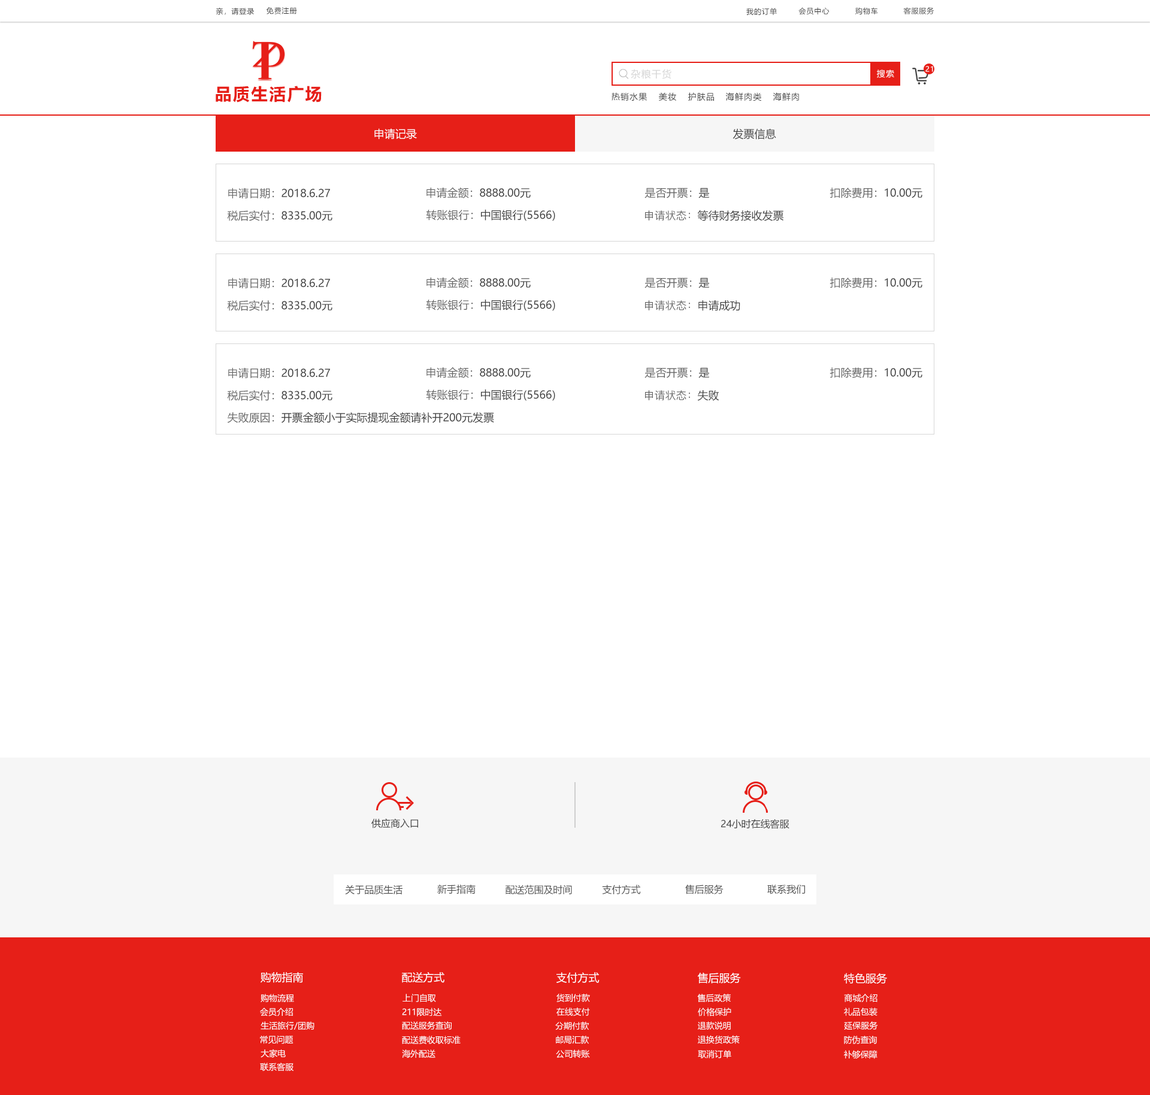
<style>
.page{position:relative;width:1150px;height:1095px;background:#ffffff}
.page>*{position:absolute;margin:0}
.t1{font:7.2px "MicrosoftYaHei";letter-spacing:0.08em;color:#404040}
.t2{font:7.2px "MicrosoftYaHei";letter-spacing:0.08em;color:#ffffff}
.t3{font:9.6px "MicrosoftYaHei";letter-spacing:0.08em;color:#d6d6d6}
.t4{font:8.4px "MicrosoftYaHei";letter-spacing:0.08em;color:#ffffff}
.t5{font:16.8px "MicrosoftYaHei-Bold";letter-spacing:0.08em;color:#e61f18}
.t6{font:8.4px "MicrosoftYaHei";letter-spacing:0.08em;color:#404040}
.t7{font:10.8px "MicrosoftYaHei";color:#ffffff}
.t8{font:10.8px "MicrosoftYaHei";color:#404040}
.t9{font:10.8px "MicrosoftYaHei";color:#404040;text-transform:uppercase}
.t10{font:10.8px "MicrosoftYaHei";color:#666666;text-transform:uppercase}
.t11{font:10.8px "PingFang-SC-Medium";color:#666666;text-transform:uppercase}
.t12{font:9.6px "MicrosoftYaHei";color:#404040}
.t13{font:9.6px "MicrosoftYaHei";color:#505050}
.t14{font:8.4px "MicrosoftYaHei";color:#ffffff}
</style>
<div class="page">
<p class="t1" style="left:216px;top:7px;width:38px;height:8px">亲，请登录</p>
<p class="t1" style="left:266px;top:7px;width:31px;height:7px">免费注册</p>
<p class="t1" style="left:747px;top:8px;width:30px;height:7px">我的订单</p>
<p class="t1" style="left:799px;top:7px;width:31px;height:8px">会员中心</p>
<p class="t1" style="left:856px;top:7px;width:22px;height:8px">购物车</p>
<p class="t1" style="left:904px;top:7px;width:31px;height:7px">客服服务</p>
<p class="t2" style="left:926px;top:66px;width:8px;height:6px">21</p>
<p class="t3" style="left:631px;top:69px;width:41px;height:10px">杂粮干货</p>
<p class="t4" style="left:877px;top:70px;width:18px;height:8px">搜索</p>
<p class="t5" style="left:216px;top:86px;width:106px;height:16px">品质生活广场</p>
<p class="t6" style="left:612px;top:92px;width:36px;height:9px">热销水果</p>
<p class="t6" style="left:659px;top:92px;width:17px;height:9px">美妆</p>
<p class="t6" style="left:688px;top:92px;width:26px;height:9px">护肤品</p>
<p class="t6" style="left:726px;top:92px;width:36px;height:9px">海鲜肉类</p>
<p class="t6" style="left:773px;top:92px;width:26px;height:9px">海鲜肉</p>
<p class="t7" style="left:374px;top:128px;width:43px;height:11px">申请记录</p>
<p class="t8" style="left:733px;top:128px;width:44px;height:12px">发票信息</p>
<p class="t9" style="left:228px;top:188px;width:102px;height:11px"><span class="t10">申请日期：</span>2018.6.27</p>
<p class="t9" style="left:427px;top:187px;width:104px;height:11px"><span class="t10">申请金额：</span>8888.00元</p>
<p class="t10" style="left:645px;top:188px;width:65px;height:10px">是否开票：<span class="t9">是</span></p>
<p class="t9" style="left:830px;top:188px;width:93px;height:10px"><span class="t10">扣除费用：</span>10.00元</p>
<p class="t9" style="left:426px;top:209px;width:129px;height:12px"><span class="t10">转账银行：</span>中国银行(5566)</p>
<p class="t9" style="left:645px;top:210px;width:139px;height:11px"><span class="t11">申请状态：</span>等待财务接收发票</p>
<p class="t9" style="left:227px;top:210px;width:106px;height:11px"><span class="t10">税后实付：</span>8335.00元</p>
<p class="t9" style="left:228px;top:277px;width:102px;height:12px"><span class="t10">申请日期：</span>2018.6.27</p>
<p class="t9" style="left:427px;top:277px;width:104px;height:11px"><span class="t10">申请金额：</span>8888.00元</p>
<p class="t10" style="left:645px;top:277px;width:65px;height:11px">是否开票：<span class="t9">是</span></p>
<p class="t9" style="left:830px;top:277px;width:93px;height:11px"><span class="t10">扣除费用：</span>10.00元</p>
<p class="t9" style="left:227px;top:300px;width:106px;height:11px"><span class="t10">税后实付：</span>8335.00元</p>
<p class="t9" style="left:426px;top:299px;width:129px;height:12px"><span class="t10">转账银行：</span>中国银行(5566)</p>
<p class="t11" style="left:645px;top:300px;width:96px;height:11px">申请状态：<span class="t9">申请成功</span></p>
<p class="t9" style="left:228px;top:367px;width:102px;height:12px"><span class="t10">申请日期：</span>2018.6.27</p>
<p class="t9" style="left:427px;top:367px;width:104px;height:11px"><span class="t10">申请金额：</span>8888.00元</p>
<p class="t10" style="left:645px;top:367px;width:65px;height:11px">是否开票：<span class="t9">是</span></p>
<p class="t9" style="left:830px;top:367px;width:93px;height:11px"><span class="t10">扣除费用：</span>10.00元</p>
<p class="t9" style="left:426px;top:389px;width:129px;height:12px"><span class="t10">转账银行：</span>中国银行(5566)</p>
<p class="t9" style="left:227px;top:390px;width:106px;height:11px"><span class="t10">税后实付：</span>8335.00元</p>
<p class="t11" style="left:645px;top:390px;width:75px;height:11px">申请状态：<span class="t9">失败</span></p>
<p class="t9" style="left:227px;top:412px;width:267px;height:11px"><span class="t10">失败原因：</span>开票金额小于实际提现金额请补开200元发票</p>
<p class="t12" style="left:372px;top:818px;width:46px;height:10px">供应商入口</p>
<p class="t12" style="left:721px;top:819px;width:69px;height:10px">24小时在线客服</p>
<p class="t13" style="left:345px;top:884px;width:58px;height:11px">关于品质生活</p>
<p class="t13" style="left:437px;top:884px;width:39px;height:10px">新手指南</p>
<p class="t13" style="left:506px;top:884px;width:66px;height:11px">配送范围及时间</p>
<p class="t13" style="left:602px;top:884px;width:39px;height:10px">支付方式</p>
<p class="t13" style="left:685px;top:884px;width:39px;height:10px">售后服务</p>
<p class="t13" style="left:768px;top:884px;width:37px;height:10px">联系我们</p>
<p class="t7" style="left:261px;top:972px;width:42px;height:11px">购物指南</p>
<p class="t7" style="left:402px;top:972px;width:43px;height:11px">配送方式</p>
<p class="t7" style="left:557px;top:972px;width:43px;height:11px">支付方式</p>
<p class="t7" style="left:697px;top:972px;width:44px;height:11px">售后服务</p>
<p class="t7" style="left:844px;top:972px;width:43px;height:12px">特色服务</p>
<p class="t14" style="left:261px;top:993px;width:33px;height:9px">购物流程</p>
<p class="t14" style="left:403px;top:993px;width:33px;height:9px">上门自取</p>
<p class="t14" style="left:557px;top:993px;width:33px;height:9px">货到付款</p>
<p class="t14" style="left:697px;top:993px;width:34px;height:9px">售后政策</p>
<p class="t14" style="left:844px;top:993px;width:34px;height:9px">商城介绍</p>
<p class="t14" style="left:260px;top:1007px;width:33px;height:9px">会员介绍</p>
<p class="t14" style="left:402px;top:1007px;width:40px;height:9px">211限时达</p>
<p class="t14" style="left:557px;top:1007px;width:33px;height:9px">在线支付</p>
<p class="t14" style="left:698px;top:1007px;width:34px;height:9px">价格保护</p>
<p class="t14" style="left:844px;top:1007px;width:34px;height:9px">礼品包装</p>
<p class="t14" style="left:261px;top:1021px;width:54px;height:8px">生活旅行/团购</p>
<p class="t14" style="left:402px;top:1021px;width:50px;height:8px">配送服务查询</p>
<p class="t14" style="left:555px;top:1021px;width:34px;height:9px">分期付款</p>
<p class="t14" style="left:698px;top:1021px;width:33px;height:9px">退款说明</p>
<p class="t14" style="left:844px;top:1021px;width:34px;height:8px">延保服务</p>
<p class="t14" style="left:260px;top:1035px;width:34px;height:9px">常见问题</p>
<p class="t14" style="left:402px;top:1035px;width:59px;height:9px">配送费收取标准</p>
<p class="t14" style="left:556px;top:1035px;width:33px;height:9px">邮局汇款</p>
<p class="t14" style="left:698px;top:1035px;width:42px;height:9px">退换货政策</p>
<p class="t14" style="left:844px;top:1035px;width:33px;height:9px">防伪查询</p>
<p class="t14" style="left:261px;top:1049px;width:25px;height:9px">大家电</p>
<p class="t14" style="left:402px;top:1049px;width:34px;height:9px">海外配送</p>
<p class="t14" style="left:556px;top:1049px;width:34px;height:9px">公司转账</p>
<p class="t14" style="left:698px;top:1050px;width:34px;height:8px">取消订单</p>
<p class="t14" style="left:844px;top:1050px;width:34px;height:9px">补够保障</p>
<p class="t14" style="left:260px;top:1062px;width:34px;height:9px">联系客服</p>
</div>
